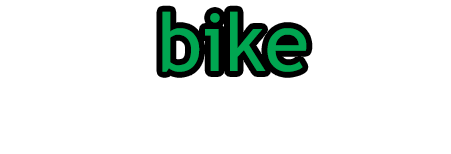
<style>
.page{position:relative;width:451px;height:154px;background:#ffffff}
.page>*{position:absolute;margin:0}
.t1{font:80px "TrebuchetMS";color:#00a651}
</style>
<div class="page">
<p class="t1" style="left:162px;top:11px;width:145px;height:61px">bike</p>
</div>
